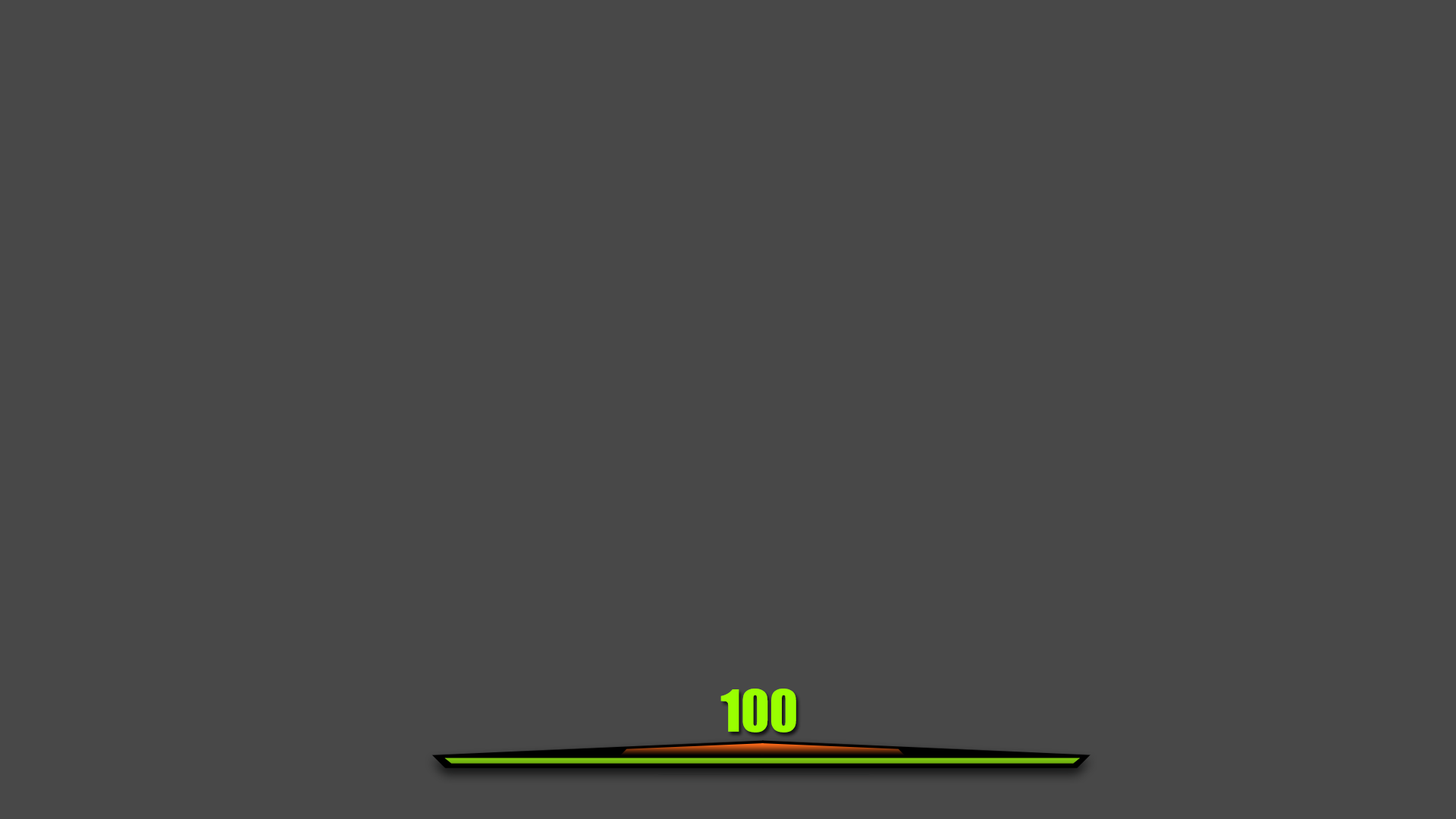
<style>
.page{position:relative;width:1456px;height:819px;background:#484848}
.page>*{position:absolute;margin:0}
.t1{font:53.1px "Impact";color:#99ff00}
</style>
<div class="page">
<p class="t1" style="left:720px;top:689px;width:76px;height:44px">100</p>
</div>
